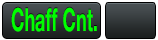
<style>
.page{position:relative;width:158px;height:40px}
.page>*{position:absolute;margin:0}
.t1{font:31.8px "HelveticaNeue-Bold";color:#00ff00;scale:0.57 1}
</style>
<div class="page">
<p class="t1" style="left:11px;top:7px;width:86px;height:25px">Chaff Cnt.</p>
</div>
